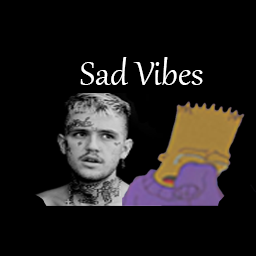
<style>
.page{position:relative;width:256px;height:256px;background:#000000}
.page>*{position:absolute;margin:0}
.t1{font:41.7px "Gabriola";color:#ffffff}
</style>
<div class="page">
<p class="t1" style="left:80px;top:57px;width:123px;height:28px">Sad Vibes</p>
</div>
